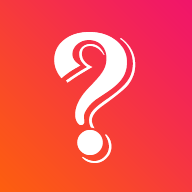
<style>
.page{position:relative;width:192px;height:192px}
.page>*{position:absolute;margin:0}
.t1{font:200px "Algerian";color:#ffffff}
</style>
<div class="page">
<p class="t1" style="left:54px;top:32px;width:82px;height:131px">?</p>
</div>
